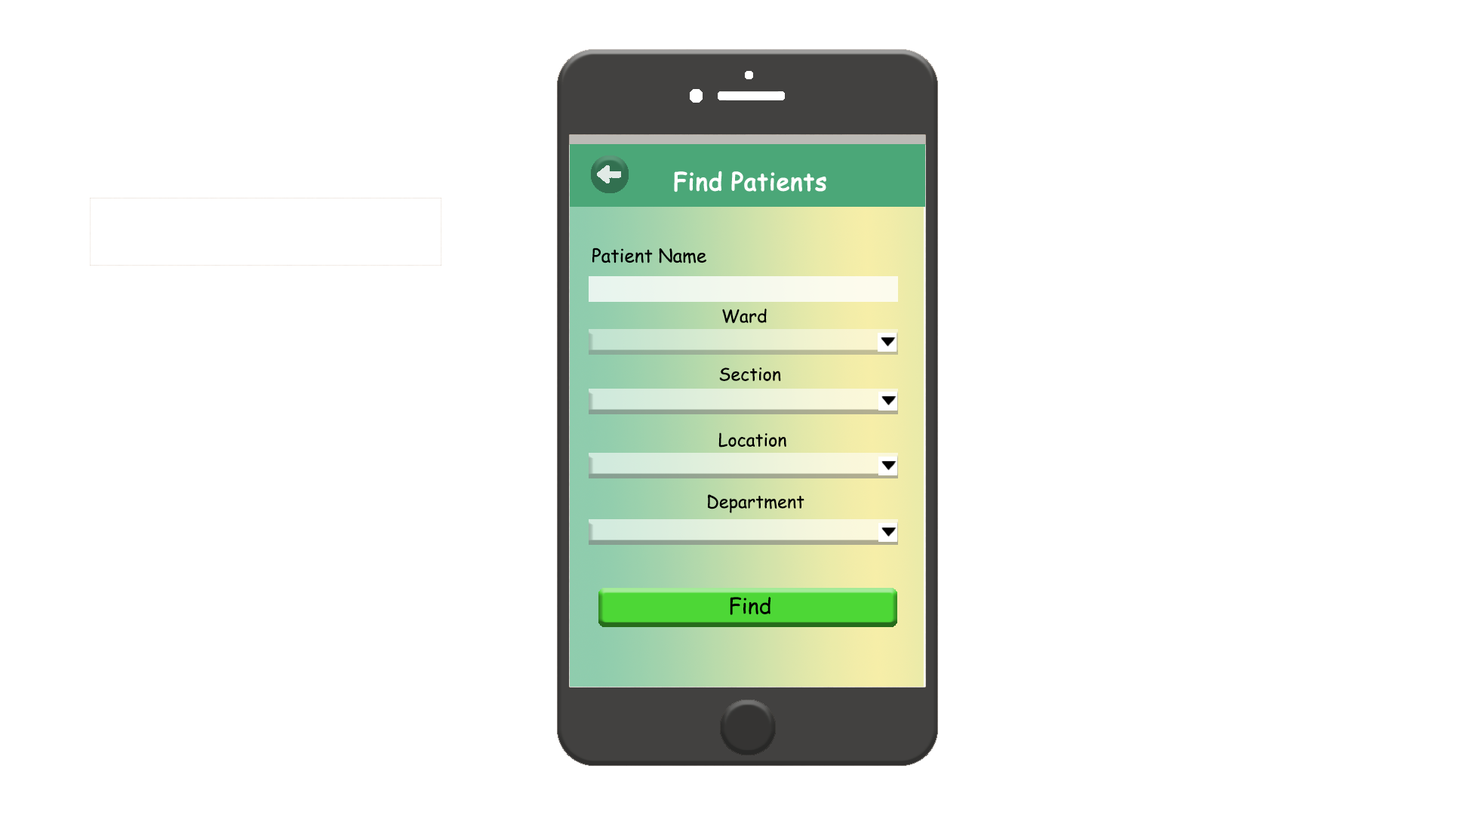
<style>
.page{position:relative;width:1464px;height:815px;background:#ffffff}
.page>*{position:absolute;margin:0}
.t1{font:18.4px "ComicSansMS";color:#000000}
.t2{font:17.6px "ComicSansMS";color:#000000}
.t3{font:21.6px "ComicSansMS";color:#000000}
</style>
<div class="page">
<p class="t1" style="left:592px;top:247px;width:114px;height:16px">Patient Name</p>
<p class="t2" style="left:722px;top:308px;width:44px;height:16px">Ward</p>
<p class="t2" style="left:719px;top:367px;width:62px;height:14px">Section</p>
<p class="t2" style="left:718px;top:432px;width:68px;height:15px">Location</p>
<p class="t2" style="left:708px;top:494px;width:96px;height:19px">Department</p>
<p class="t3" style="left:730px;top:596px;width:41px;height:19px">Find</p>
</div>
